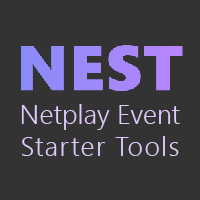
<style>
.page{position:relative;width:200px;height:200px;background:#333333}
.page>*{position:absolute;margin:0}
.t1{font:27px "SegoeUI-Semilight";color:#e0cafc}
.t2{font:27px "SegoeUI-Semilight";letter-spacing:0.05em;color:#e0cafc}
</style>
<div class="page">
<p class="t1" style="left:21px;top:104px;width:159px;height:52px;text-align:center">Netplay Event<br><span class="t2">Starter Tools</span></p>
</div>
